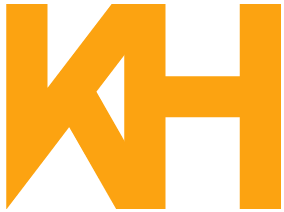
<style>
.page{position:relative;width:284px;height:212px;background:#fca311}
.page>*{position:absolute;margin:0}
.t1{font:300px "BlackFuture";color:#fca311}
</style>
<div class="page">
<p class="t1" style="left:6px;top:4px;width:158px;height:205px">K</p>
<p class="t1" style="left:124px;top:4px;width:157px;height:205px">H</p>
</div>
